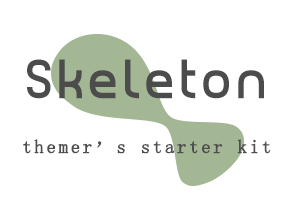
<style>
.page{position:relative;width:294px;height:219px;background:#ffffff}
.page>*{position:absolute;margin:0}
.t1{font:52.1px "PlanetEstyle";letter-spacing:0.1em;color:#4c4c4c}
.t2{font:18.7px "SimSun";letter-spacing:0.118em;color:#4d4d4d;font-weight:bold}
</style>
<div class="page">
<p class="t1" style="left:27px;top:59px;width:237px;height:40px">Skeleton</p>
<p class="t1" style="left:27px;top:59px;width:237px;height:40px">Skeleton</p>
<p class="t2" style="left:23px;top:139px;width:248px;height:15px">themer’s starter kit</p>
</div>
